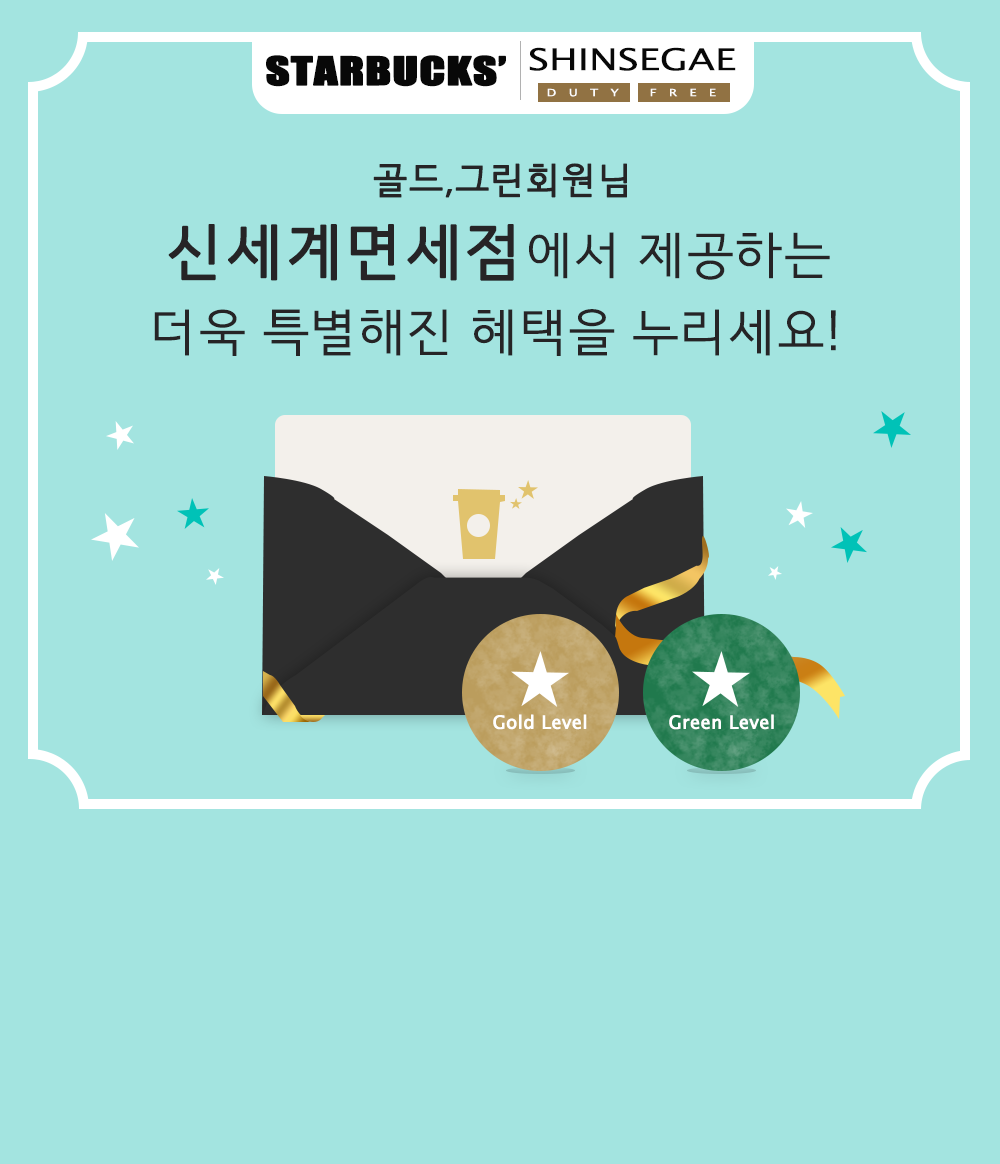
<style>
.page{position:relative;width:1000px;height:1164px;background:#a3e4e0}
.page>*{position:absolute;margin:0}
.t1{font:30px "LucidaSansUnicode";color:#080808;scale:1.3 1}
.t2{font:36px "Impact";color:#080808;font-weight:bold;scale:1.3 1}
.t3{font:10px "LucidaSansUnicode";color:#fdfdfd;scale:1.3 1}
.t4{font:36px "HCRDotum";color:#262426;font-weight:bold}
.t5{font:50px "HCRDotum";color:#262426}
.t6{font:60px "HCRDotum";color:#262426;font-weight:bold}
.t7{font:18px "LucidaSansUnicode";color:#ffffff;font-weight:bold}
</style>
<div class="page">
<p class="t1" style="left:529px;top:47px;width:207px;height:24px">SHINSEGAE</p>
<p class="t2" style="left:266px;top:55px;width:240px;height:32px">STARBUCKS’</p>
<p class="t3" style="left:547px;top:88px;width:72px;height:9px">D   U   T   Y</p>
<p class="t3" style="left:650px;top:88px;width:66px;height:9px">F   R   E   E</p>
<p class="t4" style="left:373px;top:163px;width:254px;height:35px">골드,그린회원님</p>
<p class="t5" style="left:168px;top:224px;width:662px;height:57px"><span class="t6">신세계면세점</span>에서 제공하는</p>
<p class="t5" style="left:154px;top:309px;width:682px;height:47px">더욱 특별해진 혜택을 누리세요!</p>
<p class="t7" style="left:493px;top:714px;width:94px;height:16px">Gold Level</p>
<p class="t7" style="left:669px;top:714px;width:105px;height:16px">Green Level</p>
</div>
